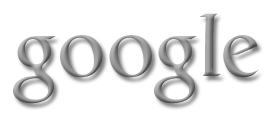
<style>
.page{position:relative;width:275px;height:120px;background:#ffffff}
.page>*{position:absolute;margin:0}
.t1{font:88px "Catull-Regular";color:#999999}
</style>
<div class="page">
<p class="t1" style="left:13px;top:13px;width:246px;height:91px">google</p>
</div>
